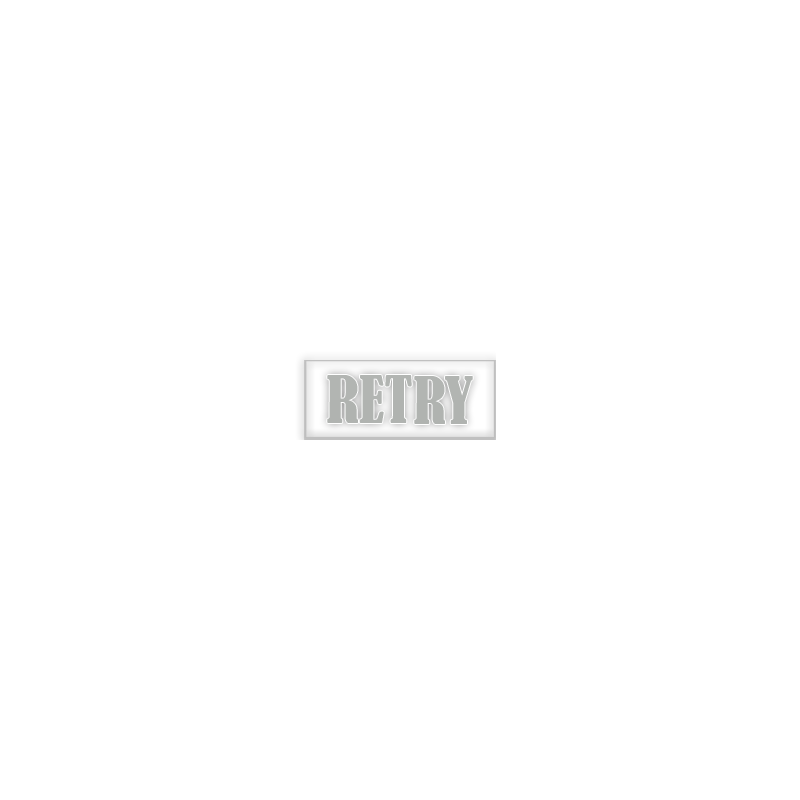
<style>
.page{position:relative;width:800px;height:800px;background:#ffffff}
.page>*{position:absolute;margin:0}
.t1{font:60.9px "BernardMT-Condensed";color:#b0b3b0}
</style>
<div class="page">
<p class="t1" style="left:327px;top:375px;width:146px;height:49px">RETRY</p>
</div>
